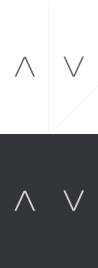
<style>
.page{position:relative;width:98px;height:268px;background:#333638}
.page>*{position:absolute;margin:0}
.t1{font:44.7px "BauhausLightCTT";color:#6a6a6a}
.t2{font:44.6px "BauhausLightCTT";color:#6a6a6a}
.t3{font:44.7px "BauhausLightCTT";color:#d0d1d1}
.t4{font:44.6px "BauhausLightCTT";color:#d0d1d1}
</style>
<div class="page">
<p class="t1" style="left:14px;top:56px;width:22px;height:21px;rotate:-90deg">&gt;</p>
<p class="t2" style="left:63px;top:56px;width:21px;height:21px;rotate:90deg">&gt;</p>
<p class="t3" style="left:14px;top:190px;width:22px;height:21px;rotate:-90deg">&gt;</p>
<p class="t4" style="left:63px;top:190px;width:21px;height:21px;rotate:90deg">&gt;</p>
</div>
